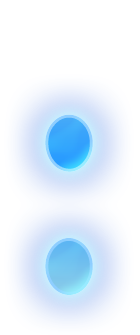
<style>
.page{position:relative;width:140px;height:335px;background:#ffffff}
.page>*{position:absolute;margin:0}
.t1{font:360px "AGBuchRoundedCondensedBQ-BoldOutline";letter-spacing:0.025em;scale:0.83 1}
</style>
<div class="page">
<p class="t1" style="left:45px;top:114px;width:48px;height:181px">:</p>
<p class="t1" style="left:45px;top:114px;width:48px;height:181px">:</p>
<p class="t1" style="left:45px;top:114px;width:48px;height:181px">:</p>
</div>
